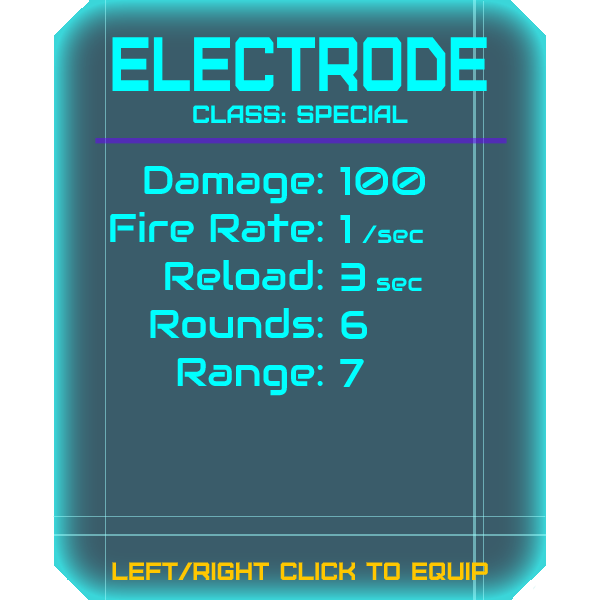
<style>
.page{position:relative;width:600px;height:600px;background:#3a5c6a}
.page>*{position:absolute;margin:0}
.t1{font:76.8px "Furore";color:#00ffff;scale:0.79 1}
.t2{font:25px "Furore";color:#00ffff}
.t3{font:40px "Audiowide-Regular";color:#00ffff}
.t4{font:25px "Audiowide-Regular";color:#00ffff}
.t5{font:25px "Furore";color:#ffc700}
</style>
<div class="page">
<p class="t1" style="left:112px;top:37px;width:375px;height:54px">Electrode</p>
<p class="t2" style="left:193px;top:105px;width:215px;height:18px">Class: Special</p>
<p class="t3" style="left:110px;top:165px;width:213px;height:231px;text-align:right">Damage:<br>Fire Rate:<br>Reload:<br>Rounds:<br>Range:</p>
<p class="t3" style="left:340px;top:166px;width:86px;height:221px">100<br>1 <span class="t4">/sec<br></span>3 <span class="t4">sec<br></span>6<br>7</p>
<p class="t5" style="left:112px;top:562px;width:376px;height:18px">left/right click to equip</p>
</div>
